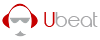
<style>
.page{position:relative;width:100px;height:40px;background:#ffffff}
.page>*{position:absolute;margin:0}
.t1{font:19px "AbeatbyKai";color:#a7a7a9}
.t2{font:19px "AbeatbyKai";color:#c60000}
</style>
<div class="page">
<p class="t1" style="left:44px;top:12px;width:54px;height:15px"><span class="t2">U</span>beat</p>
</div>
